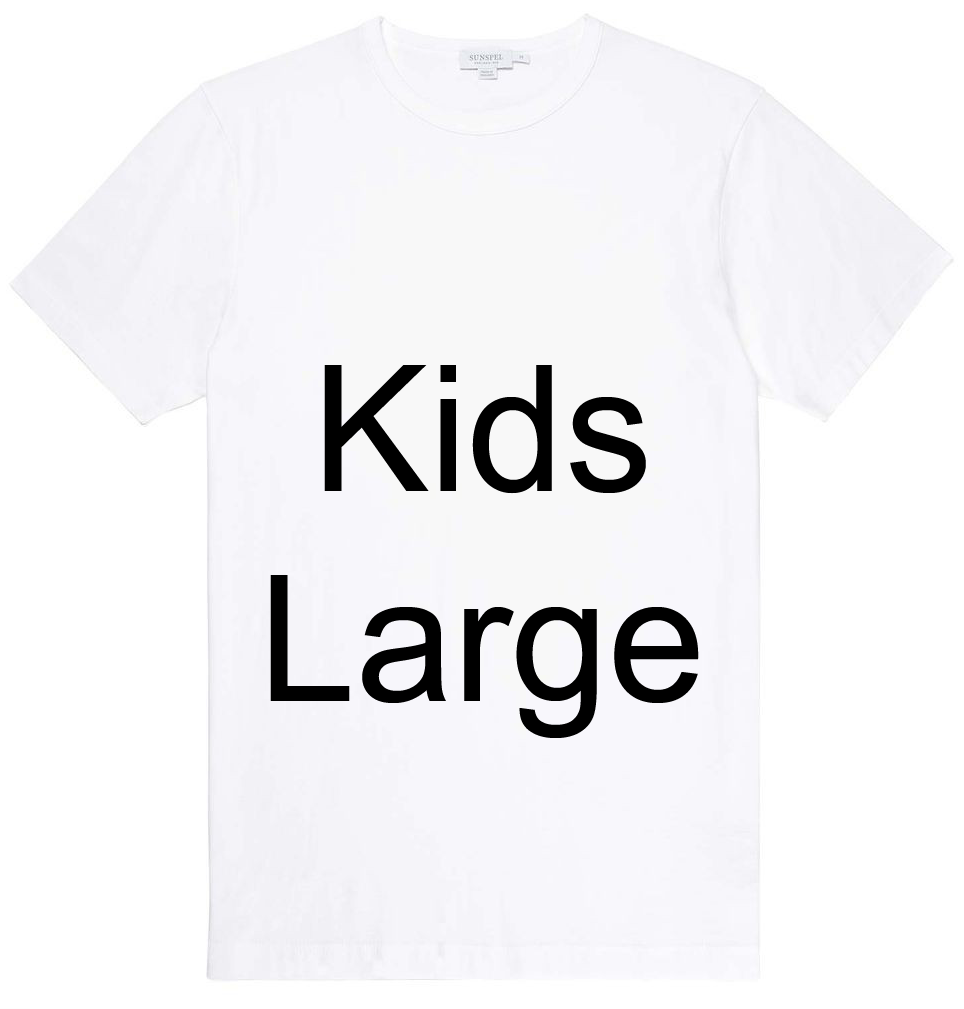
<style>
.page{position:relative;width:964px;height:1009px;background:#ffffff}
.page>*{position:absolute;margin:0}
.t1{font:175px "ArialMT";color:#000000}
</style>
<div class="page">
<p class="t1" style="left:270px;top:365px;width:429px;height:373px;text-align:center">Kids<br>Large</p>
</div>
